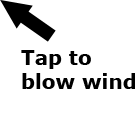
<style>
.page{position:relative;width:140px;height:140px;background:#ffffff}
.page>*{position:absolute;margin:0}
.t1{font:20px "Verdana-Bold";color:#000000}
</style>
<div class="page">
<p class="t1" style="left:21px;top:50px;width:114px;height:39px">Tap to blow wind</p>
</div>
